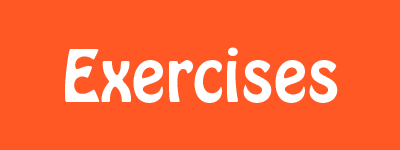
<style>
.page{position:relative;width:400px;height:150px;background:#ff5824}
.page>*{position:absolute;margin:0}
.t1{font:63.7px "HoboStd";color:#ffffff}
</style>
<div class="page">
<p class="t1" style="left:65px;top:47px;width:273px;height:56px">Exercises</p>
</div>
